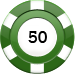
<style>
.page{position:relative;width:75px;height:74px;background:#ffffff}
.page>*{position:absolute;margin:0}
.t1{font:18px "Rockwell";color:#000000}
</style>
<div class="page">
<p class="t1" style="left:28px;top:31px;width:19px;height:12px">50</p>
</div>
